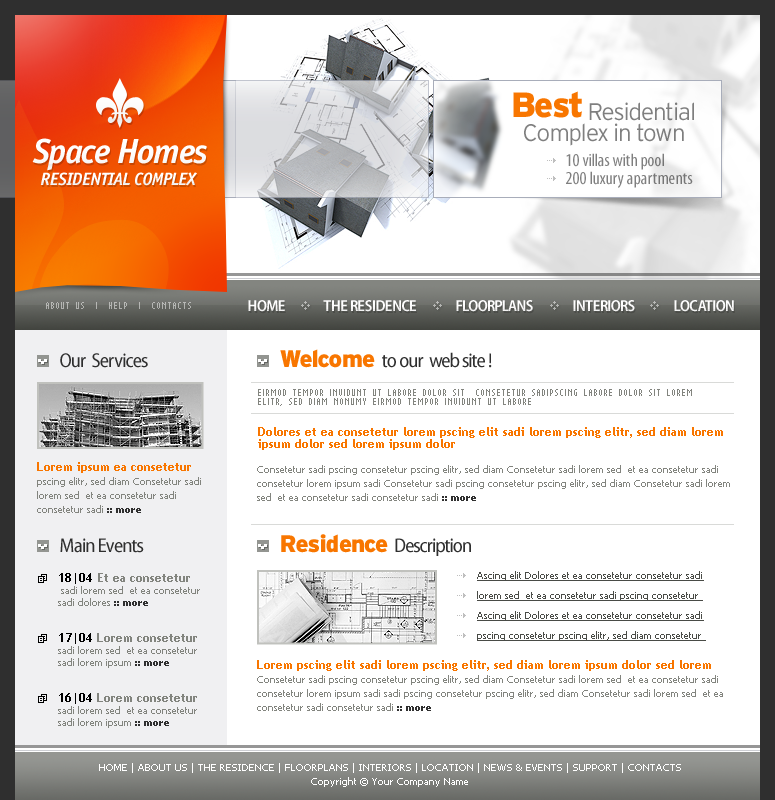
<style>
.page{position:relative;width:775px;height:800px;background:#ffffff}
.page>*{position:absolute;margin:0}
.t1{font:35px "Interstate-Black";letter-spacing:-0.04em;color:#f87600}
.t2{font:24px "Interstate-Light";letter-spacing:-0.04em;color:#7f7f7f}
.t3{font:35px "OfficinaSansStd-BoldItalic";letter-spacing:-0.04em;color:#fdfdfd}
.t4{font:18px/18px "MyriadPro-Cond";color:#7f7f7f}
.t5{font:18px "OfficinaSansStd-BoldItalic";letter-spacing:-0.04em;color:#fefefe}
.t6{font:10px "AuXDotBitCCond";color:#b3b3b1}
.t7{font:16px "MyriadPro-SemiboldSemiCn";letter-spacing:-0.04em;color:#ffffff}
.t8{font:20px "MyriadPro-SemiCn";letter-spacing:-0.04em;color:#2f2f2f}
.t9{font:24px "Interstate-Black";letter-spacing:-0.04em;color:#f87600}
.t10{font:10px/9.5px "AuXDotBitCCond";color:#82847e}
.t11{font:12px/12px "TrebuchetMS-Bold";color:#f87600}
.t12{font:10px/14px "Tahoma";color:#82847e}
.t13{font:10px/14px "Tahoma-Bold";color:#2f2f2f}
.t14{font:10px/12px "Tahoma";color:#82847e}
.t15{font:12px/12px "TrebuchetMS-Bold";color:#000000}
.t16{font:12px/12px "TrebuchetMS-Bold";color:#82847e}
.t17{font:10px/12px "Tahoma-Bold";color:#2f2f2f}
.t18{font:10px/20px "Tahoma";color:#494b46;text-decoration:underline}
.t19{font:10px/14px "Tahoma";color:#ffffff}
</style>
<div class="page">
<p class="t1" style="left:513px;top:91px;width:69px;height:27px">Best</p>
<p class="t2" style="left:589px;top:102px;width:105px;height:19px">Residential</p>
<p class="t2" style="left:524px;top:123px;width:160px;height:23px">Complex in town</p>
<p class="t3" style="left:32px;top:138px;width:175px;height:33px">Space Homes</p>
<p class="t4" style="left:566px;top:153px;width:127px;height:35px">10 villas with pool<br>200 luxury apartments</p>
<p class="t5" style="left:40px;top:172px;width:157px;height:14px">RESIDENTIAL COMPLEX</p>
<p class="t6" style="left:46px;top:302px;width:145px;height:7px">ABOUT US  |  HELP  |  CONTACTS</p>
<p class="t7" style="left:248px;top:300px;width:37px;height:12px">HOME</p>
<p class="t7" style="left:323px;top:300px;width:93px;height:12px">THE RESIDENCE</p>
<p class="t7" style="left:456px;top:300px;width:77px;height:12px">FLOORPLANS</p>
<p class="t7" style="left:573px;top:300px;width:62px;height:12px">INTERIORS</p>
<p class="t7" style="left:674px;top:300px;width:60px;height:12px">LOCATION</p>
<p class="t8" style="left:60px;top:353px;width:88px;height:15px">Our  Services</p>
<p class="t9" style="left:280px;top:349px;width:95px;height:19px">Welcome</p>
<p class="t8" style="left:382px;top:352px;width:110px;height:16px">to our  web site !</p>
<p class="t10" style="left:258px;top:389px;width:434px;height:17px">EIRMOD TEMPOR INVIDUNT UT LABORE DOLOR SIT  CONSETETUR SADIPSCING LABORE DOLOR SIT LOREM <br>ELITR, SED DIAM NONUMY EIRMOD TEMPOR INVIDUNT UT LABORE</p>
<p class="t11" style="left:258px;top:427px;width:465px;height:23px">Dolores et ea consetetur lorem pscing elit sadi lorem pscing elitr, sed diam lorem ipsum dolor sed lorem ipsum dolor</p>
<p class="t12" style="left:37px;top:462px;width:164px;height:51px"><span class="t11">Lorem ipsum ea consetetur <br></span>pscing elitr, sed diam Consetetur sadi lorem sed  et ea consetetur sadi consetetur sadi <span class="t13">:: more</span></p>
<p class="t12" style="left:257px;top:465px;width:473px;height:36px">Consetetur sadi pscing consetetur pscing elitr, sed diam Consetetur sadi lorem sed  et ea consetetur sadi consetetur lorem ipsum sadi Consetetur sadi pscing consetetur pscing elitr, sed diam Consetetur sadi lorem sed  et ea consetetur sadi consetetur sadi <span class="t13">:: more</span></p>
<p class="t8" style="left:281px;top:534px;width:190px;height:22px"><span class="t9">Residence </span>Description</p>
<p class="t8" style="left:60px;top:538px;width:84px;height:15px">Main Events</p>
<p class="t14" style="left:58px;top:573px;width:142px;height:155px"><span class="t15">18|04</span><span class="t16"> Et ea consetetur <br></span> sadi lorem sed  et ea consetetur sadi dolores <span class="t17">:: more<br><br><br></span><span class="t15">17|04</span><span class="t16"> Lorem consetetur <br></span>sadi lorem sed  et ea consetetur sadi lorem ipsum <span class="t17">:: more<br><br><br></span><span class="t15">16|04</span><span class="t16"> Lorem consetetur <br></span>sadi lorem sed  et ea consetetur sadi lorem ipsum <span class="t17">:: more</span></p>
<p class="t18" style="left:477px;top:571px;width:229px;height:70px">Ascing elit Dolores et ea consetetur consetetur sadi lorem sed  et ea consetetur sadi pscing consetetur <br>Ascing elit Dolores et ea consetetur consetetur sadi pscing consetetur pscing elitr, sed diam consetetur</p>
<p class="t12" style="left:257px;top:660px;width:466px;height:51px"><span class="t11">Lorem pscing elit sadi lorem pscing elitr, sed diam lorem ipsum dolor sed lorem <br></span>Consetetur sadi pscing consetetur pscing elitr, sed diam Consetetur sadi lorem sed  et ea consetetur sadi consetetur lorem ipsum sadi sadi pscing consetetur pscing elitr, sed diam Consetetur sadi lorem sed  et ea consetetur sadi consetetur sadi <span class="t13">:: more</span></p>
<p class="t19" style="left:99px;top:763px;width:582px;height:24px;text-align:center">HOME | ABOUT US | THE RESIDENCE | FLOORPLANS | INTERIORS | LOCATION | NEWS &amp; EVENTS | SUPPORT | CONTACTS<br>Copyright © Your Company Name</p>
</div>
